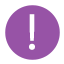
<style>
.page{position:relative;width:64px;height:64px;background:#9753a6}
.page>*{position:absolute;margin:0}
.t1{font:52px "Gidole-Regular";color:#ffffff;font-weight:bold}
</style>
<div class="page">
<p class="t1" style="left:29px;top:14px;width:6px;height:36px">!</p>
</div>
